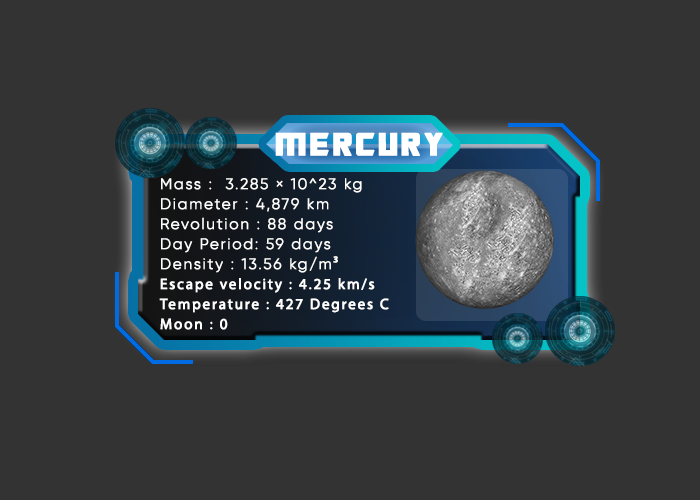
<style>
.page{position:relative;width:700px;height:500px;background:#333333}
.page>*{position:absolute;margin:0}
.t1{font:35px "TransformersMovie";letter-spacing:0.1em;color:#ffffff;font-weight:bold}
.t2{font:15px/20px "Gilroy-Light";letter-spacing:0.1em;color:#ffffff;font-weight:bold}
.t3{font:15px/20px "MyriadPro-Regular";letter-spacing:0.1em;color:#ffffff;font-weight:bold}
</style>
<div class="page">
<p class="t1" style="left:275px;top:132px;width:168px;height:24px">MErcury</p>
<p class="t2" style="left:159px;top:178px;width:230px;height:152px">Mass :  3.285 × 10^23 kg<br>Diameter : 4,879 km<br>Revolution : 88 days<br>Day Period: 59 days<br>Density : 13.56 kg/m<span class="t3">³<br>Escape velocity : 4.25 km/s<br>Temperature : 427 Degrees C<br>Moon : 0</span></p>
</div>
